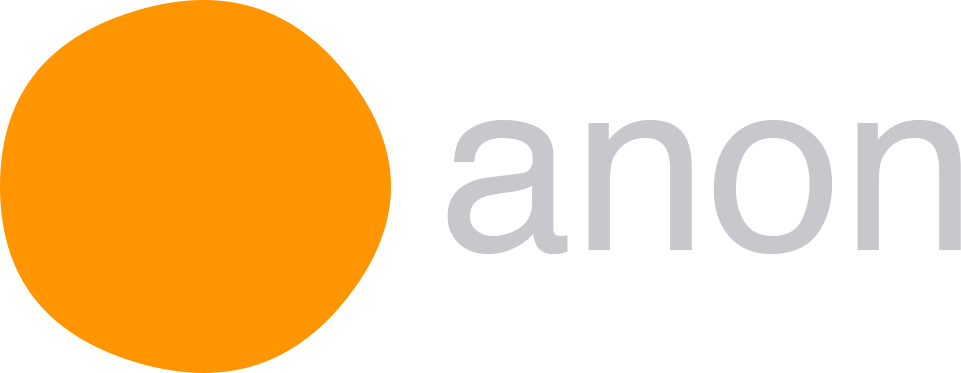
<style>
.page{position:relative;width:961px;height:373px;background:#ffffff}
.page>*{position:absolute;margin:0}
.t1{font:242px "Helvetica";color:#c7c7cc}
</style>
<div class="page">
<p class="t1" style="left:447px;top:120px;width:514px;height:134px">anon</p>
</div>
